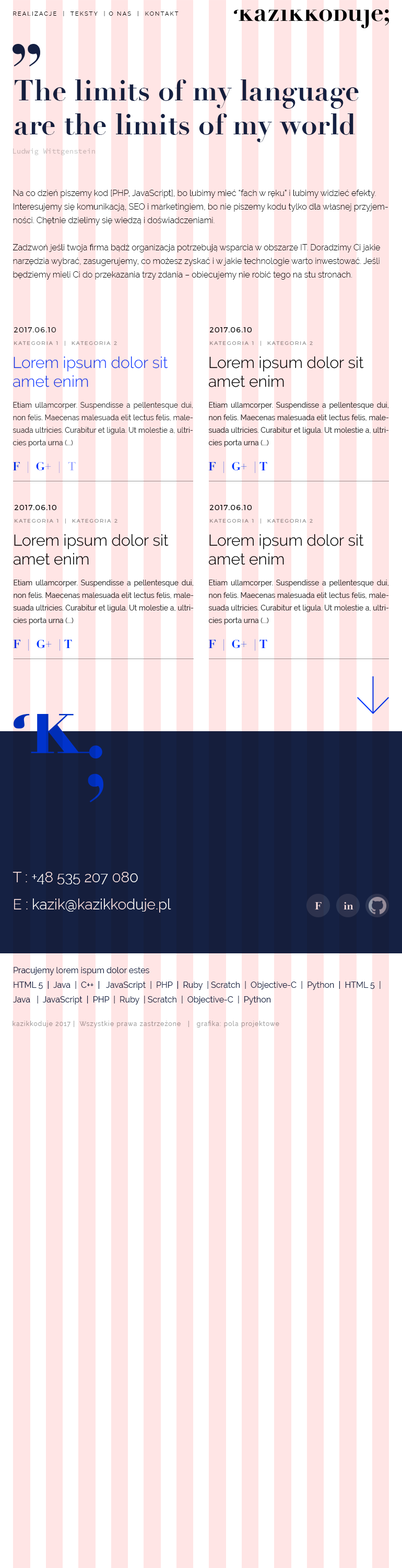
<style>
.page{position:relative;width:402px;height:1568px;background:#ffffff}
.page>*{position:absolute;margin:0}
.t1{font:5.7px "Raleway-Regular";letter-spacing:0.2em;color:#000000}
.t2{font:28.7px/34px "Didot-Bold";color:#152143}
.t3{font:7.3px "SourceCodePro-Regular";color:#cccccc}
.t4{font:8.4px/13.6px "Raleway-Light";color:#000000}
.t5{font:5.2px/12.6px "Montserrat-Light";letter-spacing:0.2em;color:#999999}
.t6{font:7.3px/12.6px "Montserrat-Light";letter-spacing:0.1em;color:#000000}
.t7{font:15.7px/18.8px "Raleway-Light"}
.t8{font:7.3px/12.6px "Raleway-Regular";color:#333333}
.t9{font:11.5px "Didot-Bold"}
.t10{font:11.5px "Didot-Bold";color:#a3adff}
.t11{font:14.6px/27.2px "Raleway-Light"}
.t12{font:10.5px "Didot-Bold";letter-spacing:0.2em;color:#ffe5e5}
.t13{font:10.5px "Didot-Bold";color:#ffe5e5}
.t14{font:8.4px/14.6px "Raleway-Regular";color:#152143}
.t15{font:6.3px "Raleway-Regular";letter-spacing:0.1em;color:#999999}
</style>
<div class="page">
<p class="t1" style="left:13px;top:11px;width:166px;height:5px">REALIZACJE  |  TEKSTY  | O NAS  |  KONTAKT</p>
<p class="t2" style="left:15px;top:79px;width:344px;height:63px">The limits of my language <br>are the limits of my world</p>
<p class="t3" style="left:13px;top:148px;width:82px;height:7px">Ludwig Wittgenstein</p>
<p class="t4" style="left:13px;top:190px;width:375px;height:90px">Na co dzień piszemy kod [PHP, JavaScript], bo lubimy mieć “fach w ręku” i lubimy widzieć efekty. Interesujemy się komunikacją, SEO i marketingiem, bo nie piszemy kodu tylko dla własnej przyjemności. Chętnie dzielimy się wiedzą i doświadczeniami. <br><br>Zadzwoń jeśli twoja firma bądź organizacja potrzebują wsparcia w obszarze IT. Doradzimy Ci jakie narzędzia wybrać, zasugerujemy, co możesz zyskać i w jakie technologie warto inwestować. Jeśli będziemy mieli Ci do przekazania trzy zdania – obiecujemy nie robić tego na stu stronach.</p>
<p class="t5" style="left:14px;top:327px;width:103px;height:19px;text-align:justify"><span class="t6">2017.06.10<br></span>KATEGORIA 1  |  KATEGORIA 2</p>
<p class="t7" style="left:13px;top:356px;width:155px;height:31px">Lorem ipsum dolor sit amet enim</p>
<p class="t8" style="left:13px;top:402px;width:180px;height:45px;text-align:justify">Etiam ullamcorper. Suspendisse a pellentesque dui, non felis. Maecenas malesuada elit lectus felis, malesuada ultricies. Curabitur et ligula. Ut molestie a, ultricies porta urna (...)</p>
<p class="t9" style="left:13px;top:462px;width:47px;height:11px">F  |  G+  |</p>
<p class="t10" style="left:68px;top:462px;width:8px;height:8px">T</p>
<p class="t11" style="left:13px;top:872px;width:158px;height:41px">T : +48 535 207 080 <br>E : kazik@kazikkoduje.pl</p>
<p class="t12" style="left:315px;top:902px;width:7px;height:7px">F</p>
<p class="t13" style="left:344px;top:902px;width:10px;height:7px">in</p>
<p class="t14" style="left:13px;top:967px;width:368px;height:38px">Pracujemy lorem ispum dolor estes<br>HTML 5  |  Java  |  C++  |   JavaScript  |  PHP  |  Ruby  | Scratch  |  Objective-C  |  Python  |  HTML 5  |  Java   |  JavaScript  |  PHP  |  Ruby  | Scratch  |  Objective-C  |  Python</p>
<p class="t15" style="left:13px;top:1021px;width:267px;height:7px">kazikkoduje 2017 |  Wszystkie prawa zastrzeżone   |   grafika: pola projektowe</p>
</div>
